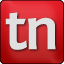
<style>
.page{position:relative;width:64px;height:64px}
.page>*{position:absolute;margin:0}
.t1{font:60px "FontinSans-Bold";letter-spacing:-0.05em;color:#e0e0e0}
</style>
<div class="page">
<p class="t1" style="left:5px;top:12px;width:51px;height:38px">tn</p>
</div>
